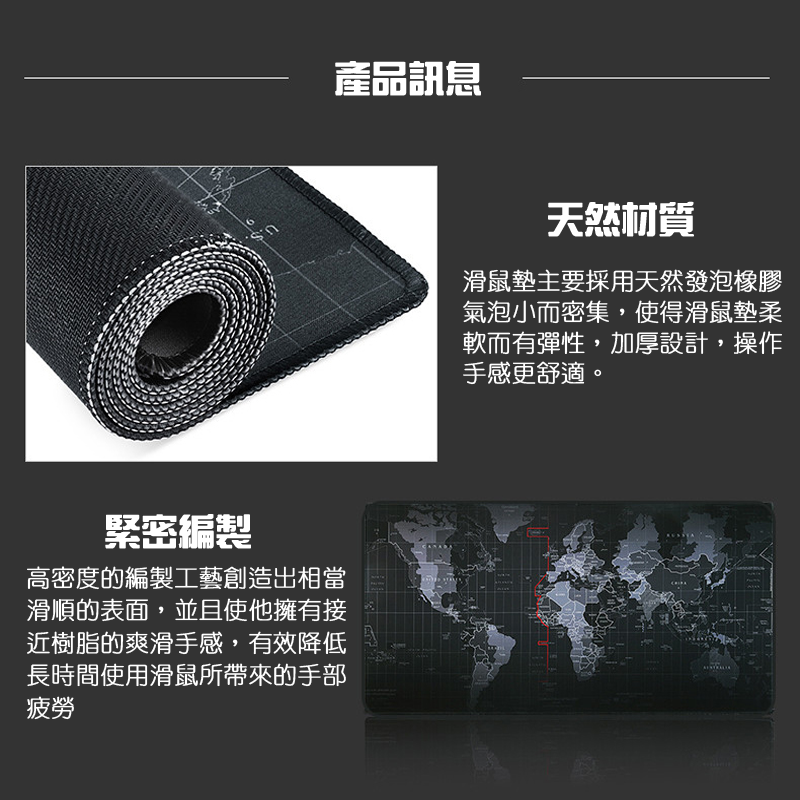
<style>
.page{position:relative;width:800px;height:800px;background:#333333}
.page>*{position:absolute;margin:0}
.t1{font:36px "HanWangZonYi";color:#ffffff;font-weight:bold}
.t2{font:24px "HanWangYenLight";color:#ffffff;font-weight:bold}
</style>
<div class="page">
<p class="t1" style="left:335px;top:61px;width:146px;height:35px">產品訊息</p>
<p class="t1" style="left:548px;top:201px;width:146px;height:36px">天然材質</p>
<p class="t2" style="left:463px;top:269px;width:319px;height:116px">滑鼠墊主要採用天然發泡橡膠<br>氣泡小而密集，使得滑鼠墊柔<br>軟而有彈性，加厚設計，操作<br>手感更舒適。</p>
<p class="t1" style="left:105px;top:514px;width:146px;height:35px">緊密編製</p>
<p class="t2" style="left:27px;top:566px;width:319px;height:154px">高密度的編製工藝創造出相當<br>滑順的表面，並且使他擁有接<br>近樹脂的爽滑手感，有效降低<br>長時間使用滑鼠所帶來的手部<br>疲勞</p>
</div>
